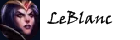
<style>
.page{position:relative;width:140px;height:40px;background:#ffffff}
.page>*{position:absolute;margin:0}
.t1{font:12px "VinerHandITC";color:#000000}
</style>
<div class="page">
<p class="t1" style="left:47px;top:10px;width:66px;height:15px">LeBlanc</p>
</div>
